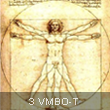
<style>
.page{position:relative;width:110px;height:110px}
.page>*{position:absolute;margin:0}
.t1{font:10px "ArialMT";color:#e3e0d7}
</style>
<div class="page">
<p class="t1" style="left:29px;top:98px;width:49px;height:7px">3 VMBO-T</p>
</div>
